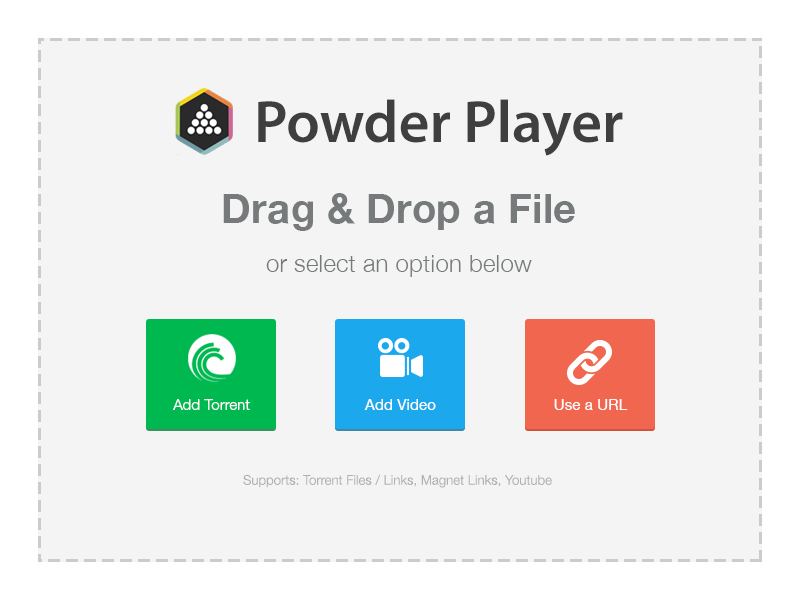
<style>
.page{position:relative;width:800px;height:600px;background:#f4f4f4}
.page>*{position:absolute;margin:0}
.t1{font:60px "MyriadPro-Semibold";color:#2a2a2a}
.t2{font:40.8px "HelveticaNeue-Bold";letter-spacing:0.01em;color:#767a7b}
.t3{font:24.5px "HelveticaNeue-Light";letter-spacing:0.01em;color:#767a7b}
.t4{font:15.4px "HelveticaNeueLTStd-Lt";letter-spacing:0.01em;color:#fefefe}
.t5{font:15.3px "HelveticaNeue";letter-spacing:0.01em;color:#ffffff}
.t6{font:15.3px "HelveticaNeue";letter-spacing:0.01em;color:#fefefe}
.t7{font:13.3px "HelveticaNeueLTStd-Lt";letter-spacing:0.01em;color:#b0b0b0}
</style>
<div class="page">
<p class="t1" style="left:258px;top:99px;width:365px;height:57px;opacity:0.94">Powder Player</p>
<p class="t2" style="left:223px;top:193px;width:352px;height:38px">Drag &amp; Drop a File</p>
<p class="t3" style="left:266px;top:255px;width:266px;height:22px">or select an option below</p>
<p class="t4" style="left:173px;top:399px;width:77px;height:11px">Add Torrent</p>
<p class="t5" style="left:364px;top:399px;width:72px;height:11px">Add Video</p>
<p class="t6" style="left:554px;top:399px;width:74px;height:11px">Use a URL</p>
<p class="t7" style="left:243px;top:474px;width:309px;height:14px">Supports: Torrent Files / Links, Magnet Links, Youtube</p>
</div>
